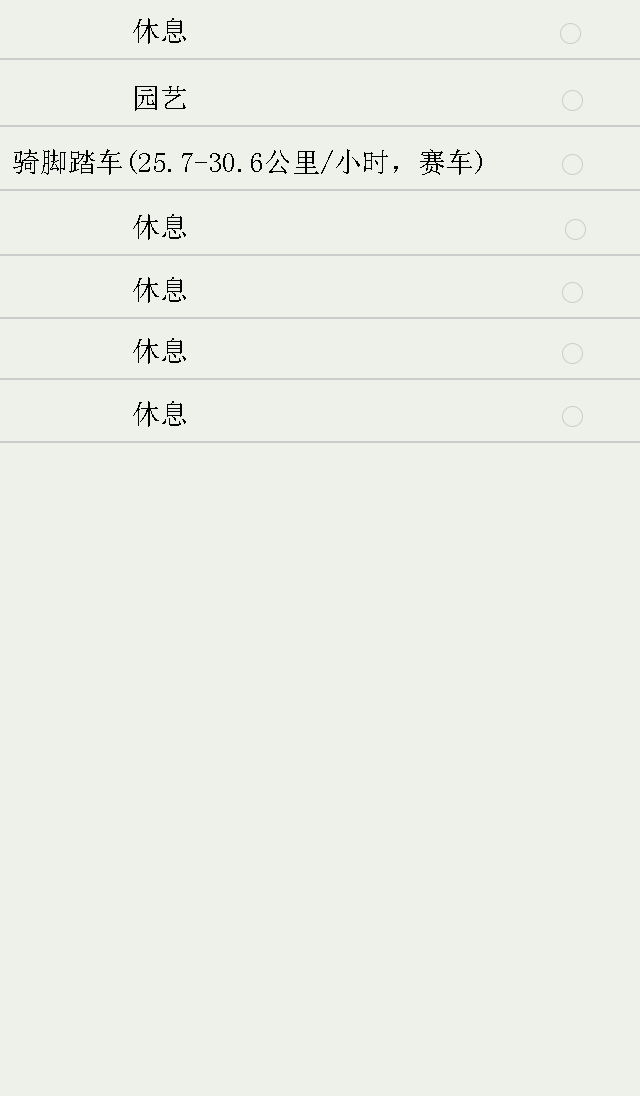
<style>
.page{position:relative;width:640px;height:1096px;background:#edf1e9}
.page>*{position:absolute;margin:0}
.t1{font:28px "SimSun";color:#000000}
</style>
<div class="page">
<p class="t1" style="left:133px;top:18px;width:53px;height:26px">休息</p>
<p class="t1" style="left:135px;top:86px;width:51px;height:25px">园艺</p>
<p class="t1" style="left:13px;top:149px;width:469px;height:26px">骑脚踏车(25.7-30.6公里/小时，赛车)</p>
<p class="t1" style="left:133px;top:214px;width:53px;height:26px">休息</p>
<p class="t1" style="left:133px;top:277px;width:53px;height:26px">休息</p>
<p class="t1" style="left:133px;top:338px;width:53px;height:26px">休息</p>
<p class="t1" style="left:133px;top:401px;width:53px;height:26px">休息</p>
</div>
